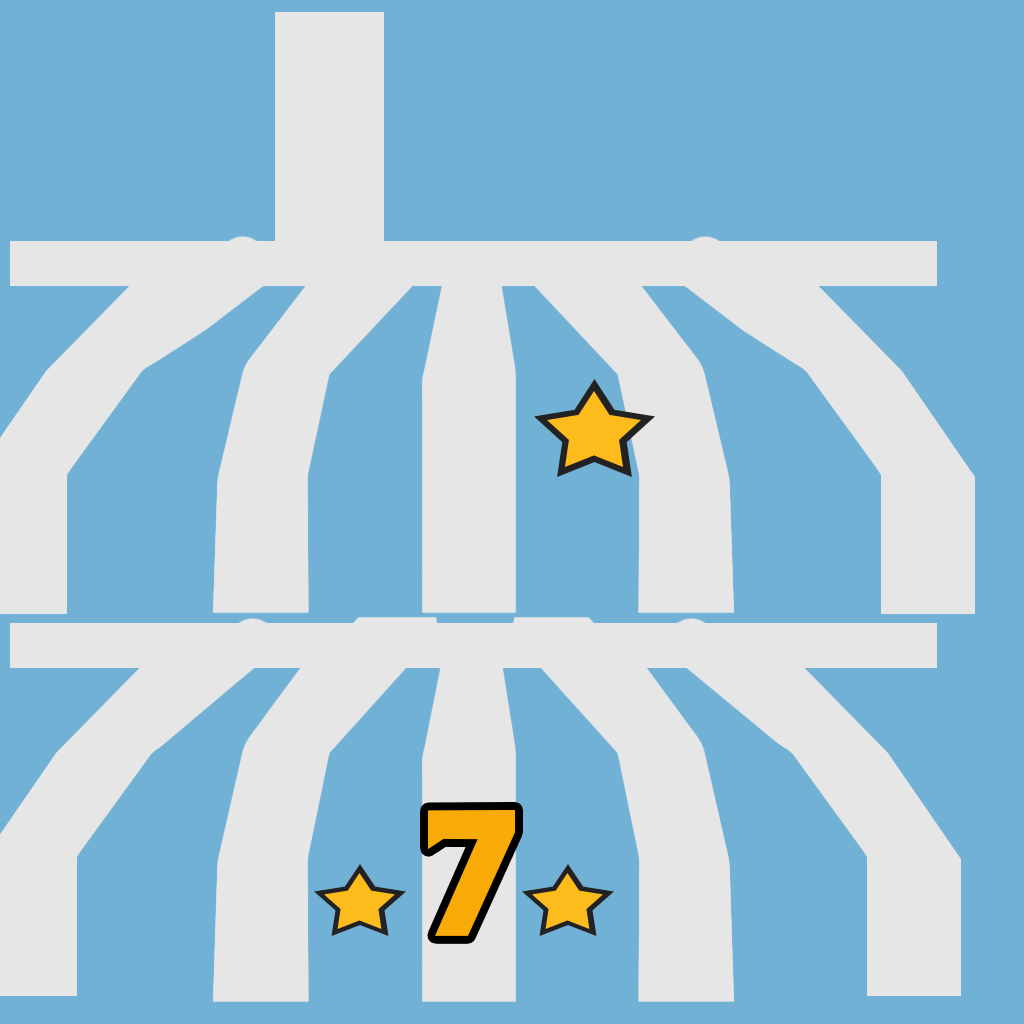
<style>
.page{position:relative;width:1024px;height:1024px;background:#71b1d6}
.page>*{position:absolute;margin:0}
.t1{font:179.4px "Luchador-Regular";letter-spacing:0.05em;color:#f8ab06}
</style>
<div class="page">
<p class="t1" style="left:428px;top:809px;width:87px;height:127px">7</p>
</div>
